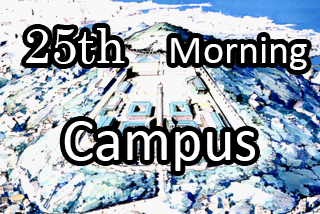
<style>
.page{position:relative;width:320px;height:214px;background:#f8f8f8}
.page>*{position:absolute;margin:0}
.t1{font:48px "Century";color:#ffffff}
.t2{font:40px "Calibri";color:#ffffff}
.t3{font:60px "Calibri";color:#ffffff}
</style>
<div class="page">
<p class="t1" style="left:26px;top:28px;width:99px;height:36px">25th</p>
<p class="t2" style="left:171px;top:37px;width:136px;height:33px">Morning</p>
<p class="t3" style="left:64px;top:121px;width:191px;height:50px">Campus</p>
</div>
